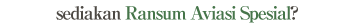
<style>
.page{position:relative;width:353px;height:24px;background:#ffffff}
.page>*{position:absolute;margin:0}
.t1{font:18px "RyuminPro-ExBold";letter-spacing:-0.08em;color:#46754a}
.t2{font:18px "RyuminPro-ExBold";letter-spacing:-0.08em;color:#4c4843}
</style>
<div class="page">
<p class="t1" style="left:56px;top:6px;width:242px;height:17px"><span class="t2">sediakan </span>Ransum Aviasi Spesial<span class="t2">?</span></p>
</div>
